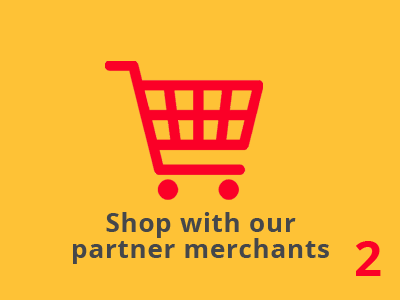
<style>
.page{position:relative;width:400px;height:300px;background:#fec236}
.page>*{position:absolute;margin:0}
.t1{font:26px/26px "OpenSans-Bold";letter-spacing:0.03em;color:#45474b}
.t2{font:49px "OpenSans-Bold";letter-spacing:0.03em;color:#fb0027}
</style>
<div class="page">
<p class="t1" style="left:73px;top:212px;width:256px;height:52px;text-align:center">Shop with our<br>partner merchants</p>
<p class="t2" style="left:356px;top:241px;width:25px;height:35px">2</p>
</div>
